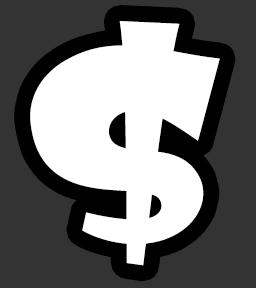
<style>
.page{position:relative;width:256px;height:288px;background:#333333}
.page>*{position:absolute;margin:0}
.t1{font:271.1px "Memoir-Square";letter-spacing:-0.1em;color:#ffffff;font-weight:bold}
</style>
<div class="page">
<p class="t1" style="left:30px;top:21px;width:190px;height:245px">＄</p>
</div>
